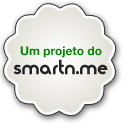
<style>
.page{position:relative;width:128px;height:128px;background:#ffffff}
.page>*{position:absolute;margin:0}
.t1{font:12px "HelveticaNeue-Bold";color:#008800}
.t2{font:18px "Moderna";color:#222222}
</style>
<div class="page">
<p class="t1" style="left:20px;top:46px;width:82px;height:12px">Um projeto do</p>
<p class="t2" style="left:13px;top:59px;width:95px;height:16px">smartn.me</p>
</div>
